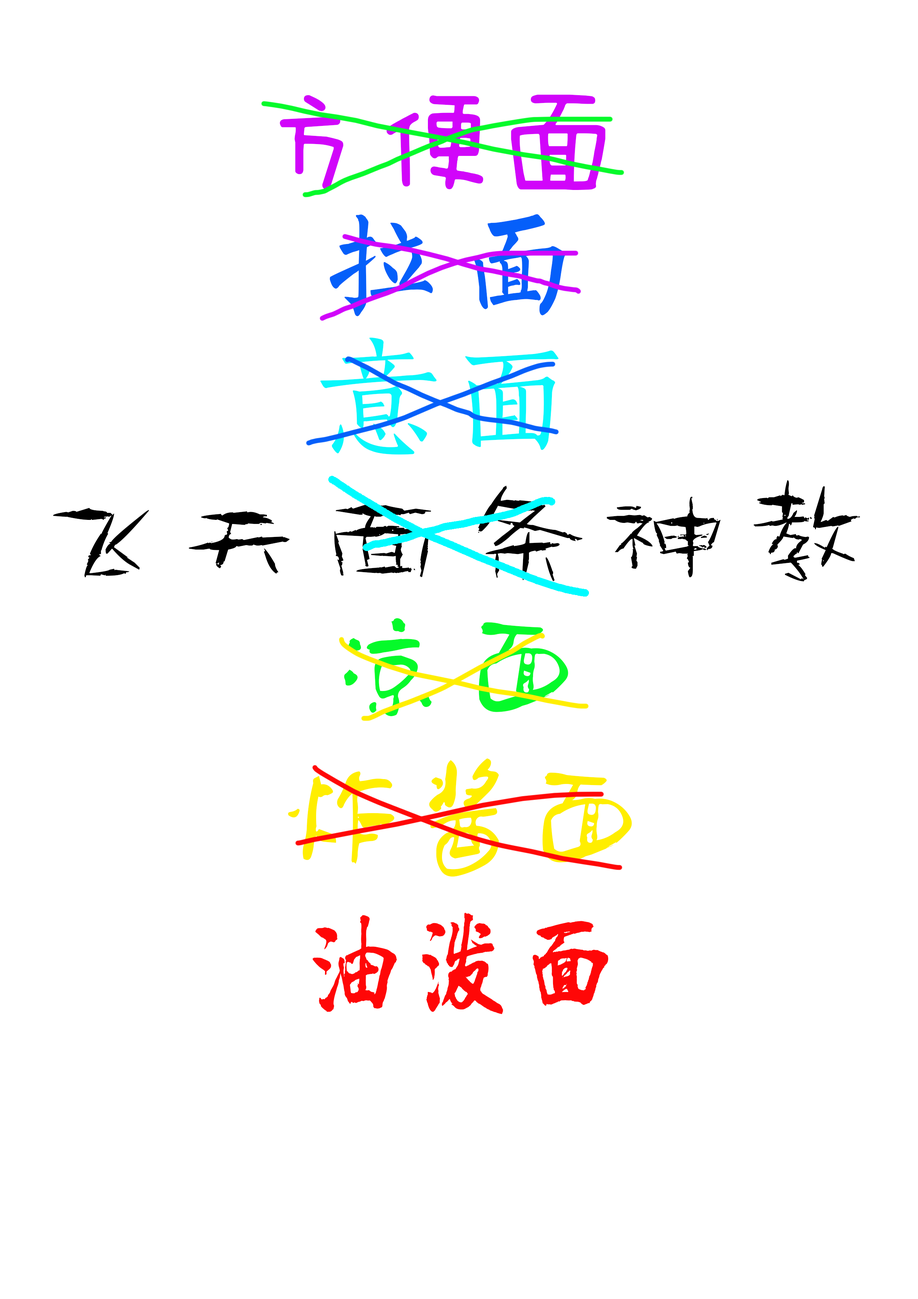
<style>
.page{position:relative;width:918px;height:1299px;background:#ffffff}
.page>*{position:absolute;margin:0}
.t1{font:123.4px "FZMWJW--GB1-0";color:#d105fa}
.t2{font:123.4px "FZSXSLKJW--GB1-0";letter-spacing:0.1em;color:#055ffa}
.t3{font:123.4px "FZSKBXKJW--GB1-0";letter-spacing:0.1em;color:#07f7fb}
.t4{font:128.8px "--";letter-spacing:0.1em;color:#000000}
.t5{font:123.4px "FZZJ-TTMBJW";letter-spacing:0.1em;color:#05fa2a}
.t6{font:123.4px "FZZJ-TTMBJW";color:#ffee00}
.t7{font:108px "LiXuKe";color:#ff0707}
</style>
<div class="page">
<p class="t1" style="left:280px;top:94px;width:326px;height:96px">方便面</p>
<p class="t2" style="left:330px;top:214px;width:236px;height:102px">拉面</p>
<p class="t3" style="left:320px;top:337px;width:239px;height:118px">意面</p>
<p class="t4" style="left:53px;top:480px;width:807px;height:101px">飞天面条神教</p>
<p class="t5" style="left:344px;top:618px;width:224px;height:98px">凉面</p>
<p class="t6" style="left:288px;top:758px;width:344px;height:119px">炸酱面</p>
<p class="t7" style="left:312px;top:913px;width:297px;height:101px">油泼面</p>
</div>
